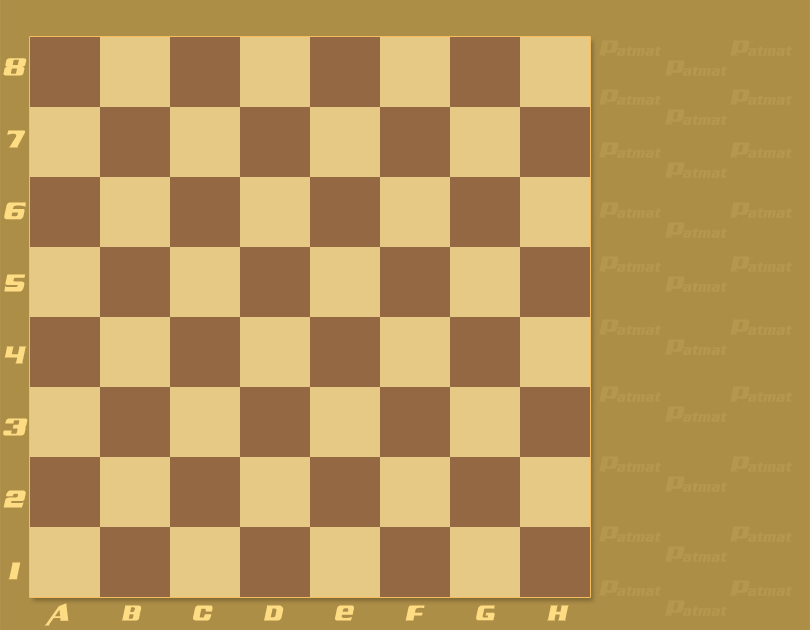
<style>
.page{position:relative;width:810px;height:630px;background:#ad8e47}
.page>*{position:absolute;margin:0}
.t1{font:22px "AirMillhouseItalic";color:#b6974e}
.t2{font:25px/72px "AirMillhouseItalic";letter-spacing:-0.025em;color:#fddc83}
.t3{font:22px "AirMillhouseItalic";letter-spacing:2.4em;color:#fddc83}
</style>
<div class="page">
<p class="t1" style="left:598px;top:40px;width:64px;height:16px">Patmat</p>
<p class="t1" style="left:729px;top:40px;width:64px;height:16px">Patmat</p>
<p class="t2" style="left:3px;top:58px;width:25px;height:522px;text-align:center">8<br>7<br>6<br>5<br>4<br>3<br>2<br>1</p>
<p class="t1" style="left:664px;top:60px;width:64px;height:16px">Patmat</p>
<p class="t1" style="left:598px;top:89px;width:64px;height:16px">Patmat</p>
<p class="t1" style="left:729px;top:89px;width:64px;height:16px">Patmat</p>
<p class="t1" style="left:664px;top:109px;width:64px;height:16px">Patmat</p>
<p class="t1" style="left:598px;top:142px;width:64px;height:16px">Patmat</p>
<p class="t1" style="left:729px;top:142px;width:64px;height:16px">Patmat</p>
<p class="t1" style="left:664px;top:162px;width:64px;height:16px">Patmat</p>
<p class="t1" style="left:598px;top:202px;width:64px;height:16px">Patmat</p>
<p class="t1" style="left:729px;top:202px;width:64px;height:16px">Patmat</p>
<p class="t1" style="left:664px;top:222px;width:64px;height:16px">Patmat</p>
<p class="t1" style="left:598px;top:256px;width:64px;height:16px">Patmat</p>
<p class="t1" style="left:729px;top:256px;width:64px;height:16px">Patmat</p>
<p class="t1" style="left:664px;top:276px;width:64px;height:16px">Patmat</p>
<p class="t1" style="left:598px;top:319px;width:64px;height:16px">Patmat</p>
<p class="t1" style="left:729px;top:319px;width:64px;height:16px">Patmat</p>
<p class="t1" style="left:664px;top:339px;width:64px;height:16px">Patmat</p>
<p class="t1" style="left:598px;top:386px;width:64px;height:16px">Patmat</p>
<p class="t1" style="left:729px;top:386px;width:64px;height:16px">Patmat</p>
<p class="t1" style="left:664px;top:406px;width:64px;height:16px">Patmat</p>
<p class="t1" style="left:598px;top:456px;width:64px;height:16px">Patmat</p>
<p class="t1" style="left:729px;top:456px;width:64px;height:16px">Patmat</p>
<p class="t1" style="left:664px;top:476px;width:64px;height:16px">Patmat</p>
<p class="t1" style="left:598px;top:526px;width:64px;height:16px">Patmat</p>
<p class="t1" style="left:729px;top:526px;width:64px;height:16px">Patmat</p>
<p class="t1" style="left:664px;top:546px;width:64px;height:16px">Patmat</p>
<p class="t1" style="left:598px;top:580px;width:64px;height:16px">Patmat</p>
<p class="t1" style="left:729px;top:580px;width:64px;height:16px">Patmat</p>
<p class="t3" style="left:44px;top:603px;width:525px;height:23px">ABCDEFGH</p>
<p class="t1" style="left:664px;top:600px;width:64px;height:16px">Patmat</p>
</div>
